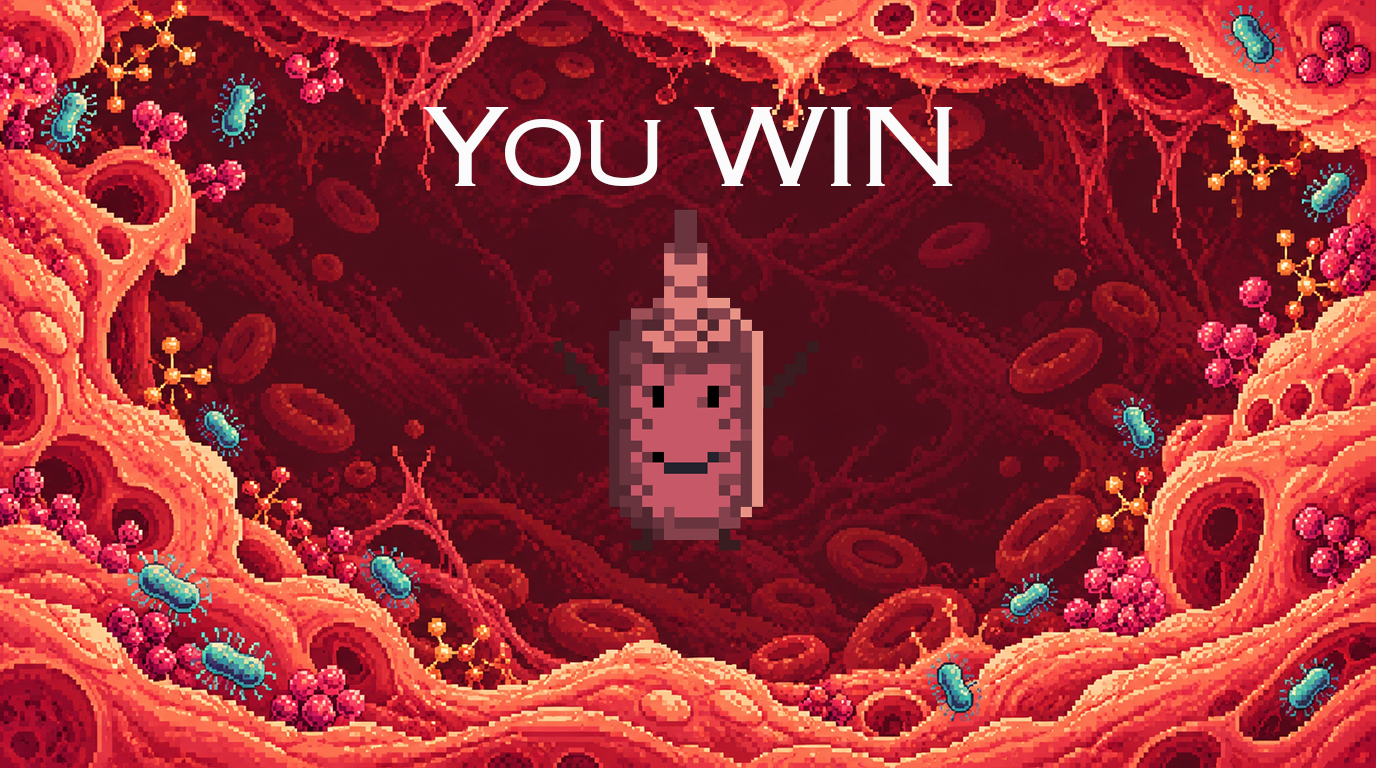
<style>
.page{position:relative;width:1376px;height:768px}
.page>*{position:absolute;margin:0}
.t1{font:150px "Copperplate-Light";letter-spacing:-0.1em;color:#fbfbfb}
</style>
<div class="page">
<p class="t1" style="left:423px;top:107px;width:530px;height:79px">You WIN</p>
</div>
